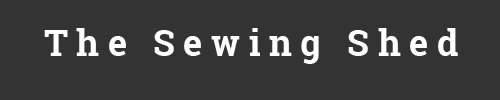
<style>
.page{position:relative;width:500px;height:100px;background:#333333}
.page>*{position:absolute;margin:0}
.t1{font:36px "RobotoSlab-Bold";letter-spacing:0.24em;color:#ffffff}
</style>
<div class="page">
<p class="t1" style="left:44px;top:28px;width:414px;height:36px">The Sewing Shed</p>
</div>
